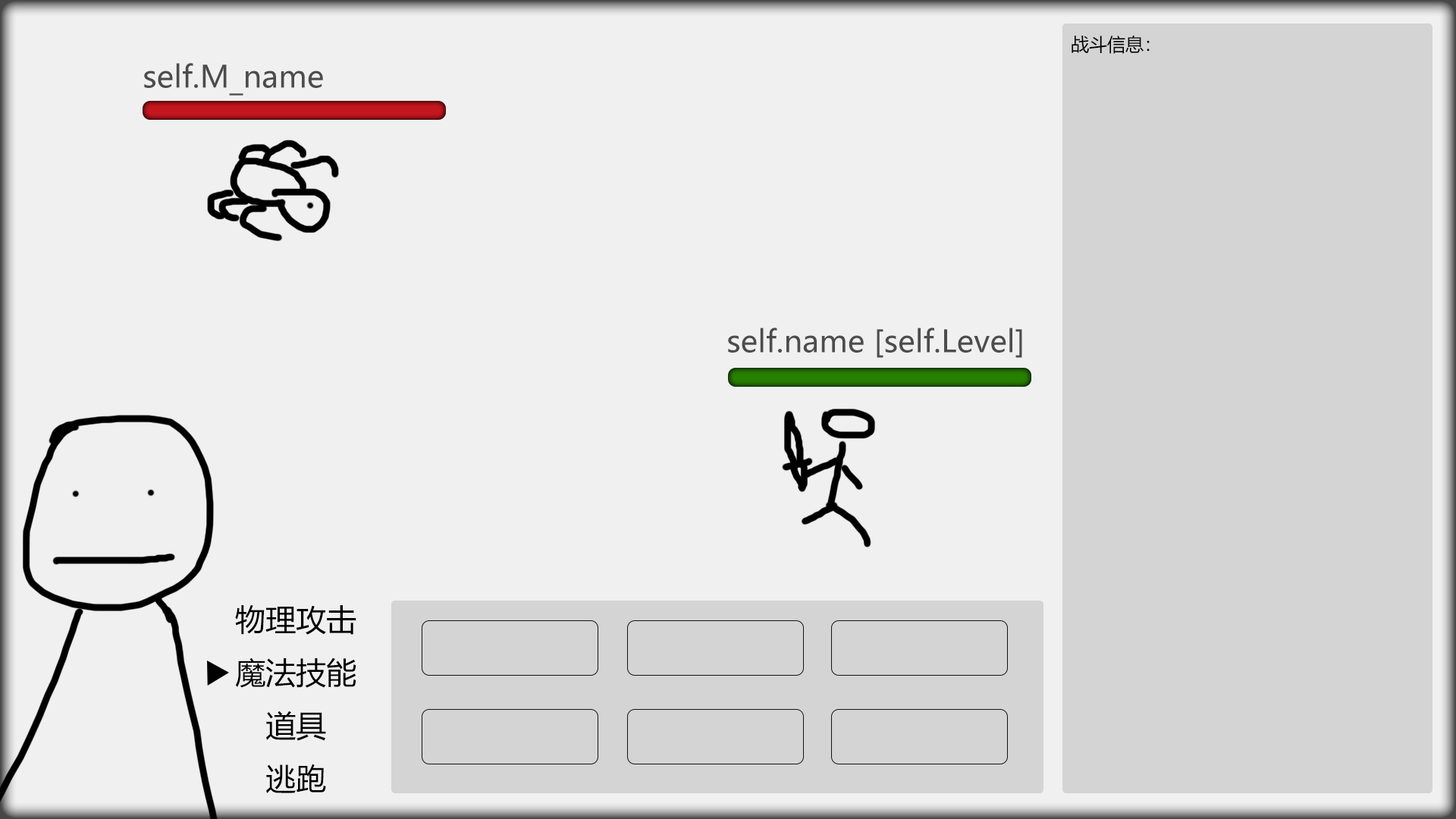
<style>
.page{position:relative;width:1456px;height:819px;background:#f0f0f0}
.page>*{position:absolute;margin:0}
.t1{font:18.2px "MicrosoftYaHei";color:#000000}
.t2{font:30.3px "MicrosoftYaHei";color:#4c4c4c}
.t3{font:30.3px/53.1px "MicrosoftYaHei";color:#000000}
</style>
<div class="page">
<p class="t1" style="left:1072px;top:35px;width:78px;height:19px">战斗信息：</p>
<p class="t2" style="left:144px;top:63px;width:179px;height:33px">self.M_name</p>
<p class="t2" style="left:728px;top:328px;width:294px;height:30px">self.name [self.Level]</p>
<p class="t3" style="left:235px;top:604px;width:121px;height:189px;text-align:center">物理攻击<br>魔法技能<br>道具<br>逃跑</p>
</div>
